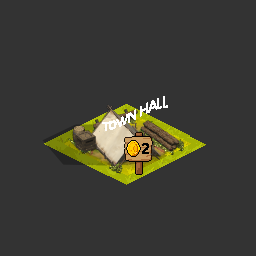
<style>
.page{position:relative;width:256px;height:256px;background:#333333}
.page>*{position:absolute;margin:0}
.t1{font:12px "SegoeUI";color:#ffffff}
</style>
<div class="page">
<p class="t1" style="left:102px;top:96px;width:66px;height:35px;text-align:right">TOWN HALL</p>
</div>
